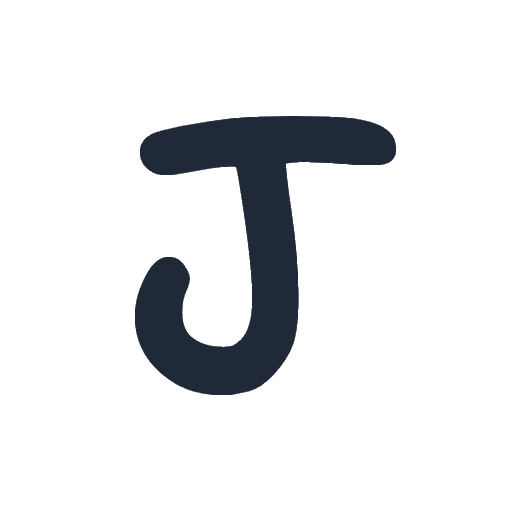
<style>
.page{position:relative;width:512px;height:512px;background:#ffffff}
.page>*{position:absolute;margin:0}
.t1{font:380px "Myfont-Regular";color:#1f2937}
</style>
<div class="page">
<p class="t1" style="left:141px;top:122px;width:249px;height:267px">J</p>
</div>
